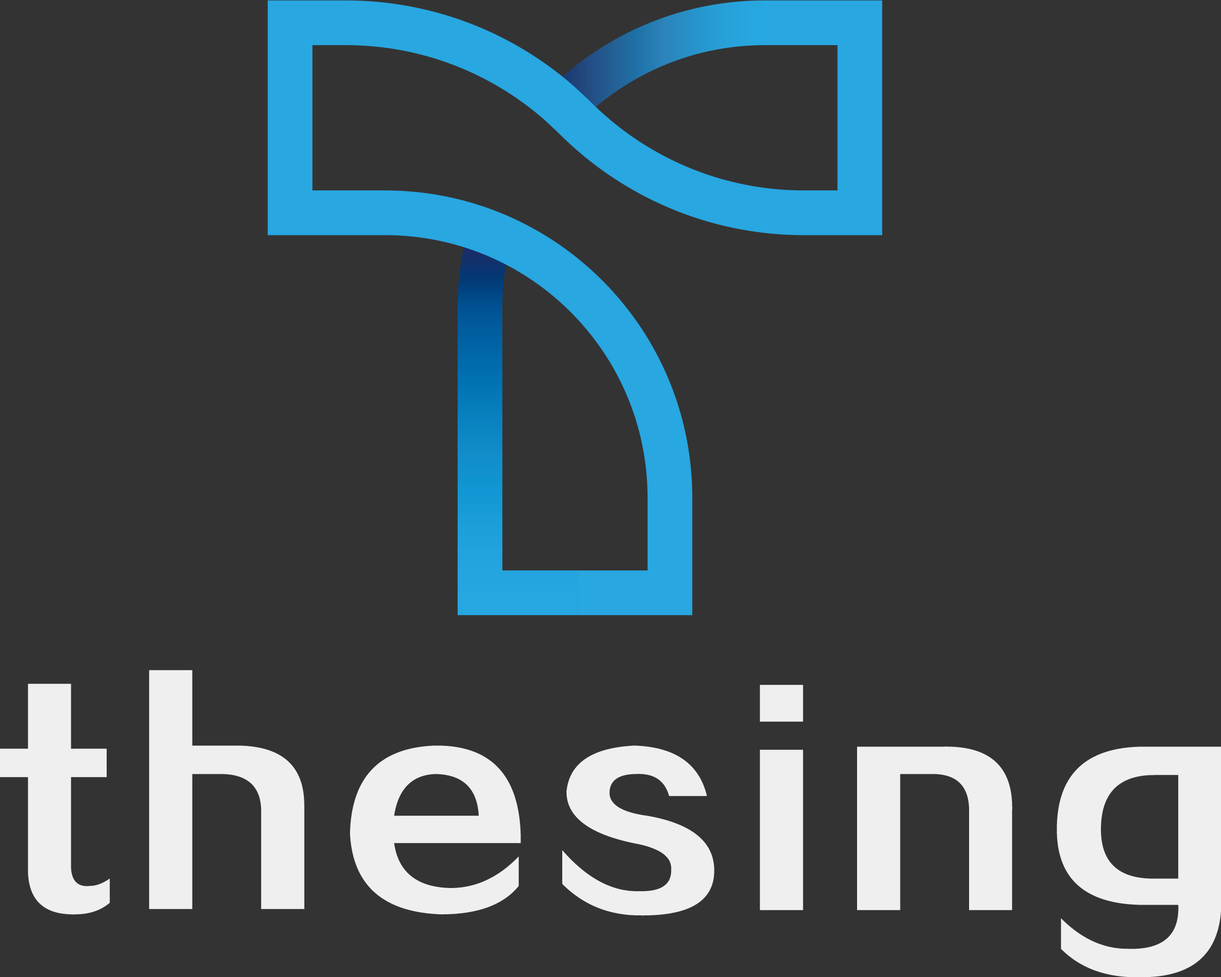
<style>
.page{position:relative;width:1221px;height:977px;background:#333333}
.page>*{position:absolute;margin:0}
.t1{font:268px "FZZCHJW--GB1-0";letter-spacing:0.05em;color:#efefef}
</style>
<div class="page">
<p class="t1" style="left:0px;top:669px;width:1222px;height:308px">thesing</p>
</div>
